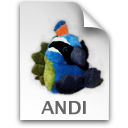
<style>
.page{position:relative;width:128px;height:128px;background:#ffffff}
.page>*{position:absolute;margin:0}
.t1{font:18px "LucidaGrande-Bold";letter-spacing:-0.02em;color:#656565}
</style>
<div class="page">
<p class="t1" style="left:41px;top:101px;width:45px;height:14px">ANDI</p>
</div>
